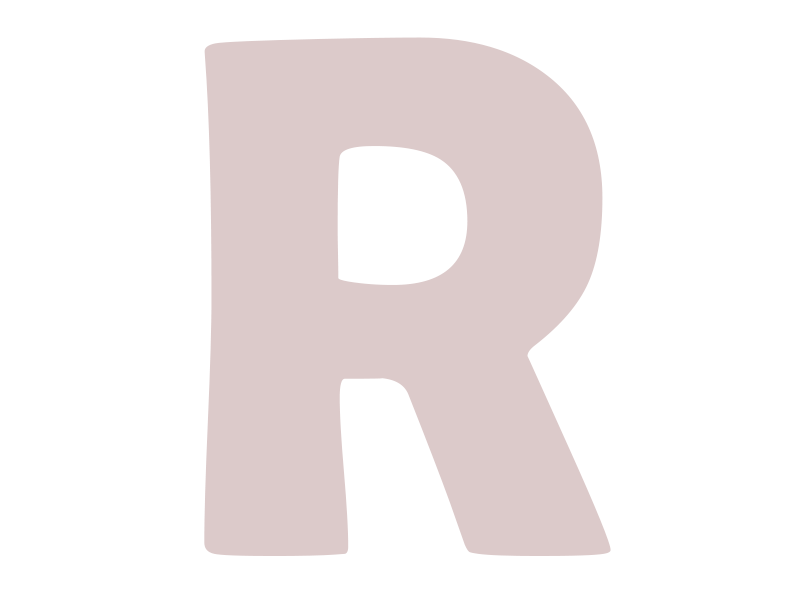
<style>
.page{position:relative;width:800px;height:600px;background:#ffffff}
.page>*{position:absolute;margin:0}
.t1{font:750.7px "BerlinSansFBDemi-Bold";color:#ddcbcb;scale:0.93 1}
</style>
<div class="page">
<p class="t1" style="left:204px;top:37px;width:407px;height:519px">R</p>
</div>
